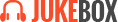
<style>
.page{position:relative;width:118px;height:22px;background:#ffffff}
.page>*{position:absolute;margin:0}
.t1{font:23.8px "Oswald-Bold";color:#fa4c29}
.t2{font:23.8px "Oswald-Bold";color:#474747}
</style>
<div class="page">
<p class="t1" style="left:31px;top:0px;width:87px;height:22px">JUKE<span class="t2">BOX</span></p>
</div>
